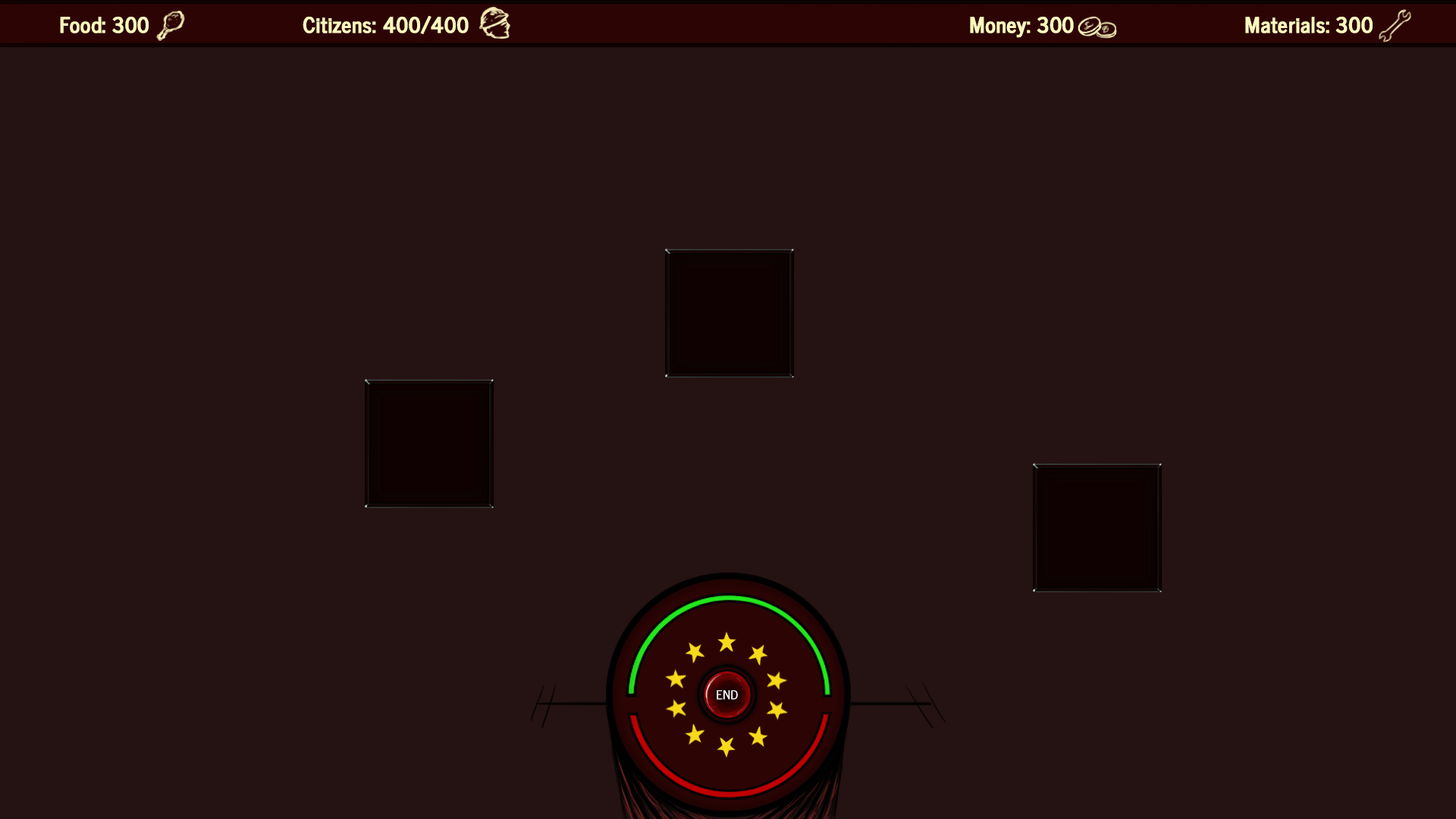
<style>
.page{position:relative;width:1456px;height:819px;background:#251212}
.page>*{position:absolute;margin:0}
.t1{font:21.2px "NewsCycle-Bold";color:#fff8be;font-weight:bold}
.t2{font:12.1px "NewsCycle";color:#ffffff;font-weight:bold}
</style>
<div class="page">
<p class="t1" style="left:60px;top:17px;width:89px;height:16px">Food: 300</p>
<p class="t1" style="left:303px;top:16px;width:166px;height:18px">Citizens: 400/400</p>
<p class="t1" style="left:970px;top:17px;width:104px;height:21px">Money: 300</p>
<p class="t1" style="left:1245px;top:17px;width:128px;height:16px">Materials: 300</p>
<p class="t2" style="left:717px;top:690px;width:21px;height:10px">END</p>
</div>
